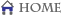
<style>
.page{position:relative;width:65px;height:15px;background:#ffffff}
.page>*{position:absolute;margin:0}
.t1{font:12px "CharlemagneStd-Bold";color:#666666}
</style>
<div class="page">
<p class="t1" style="left:19px;top:2px;width:42px;height:11px">home</p>
</div>
